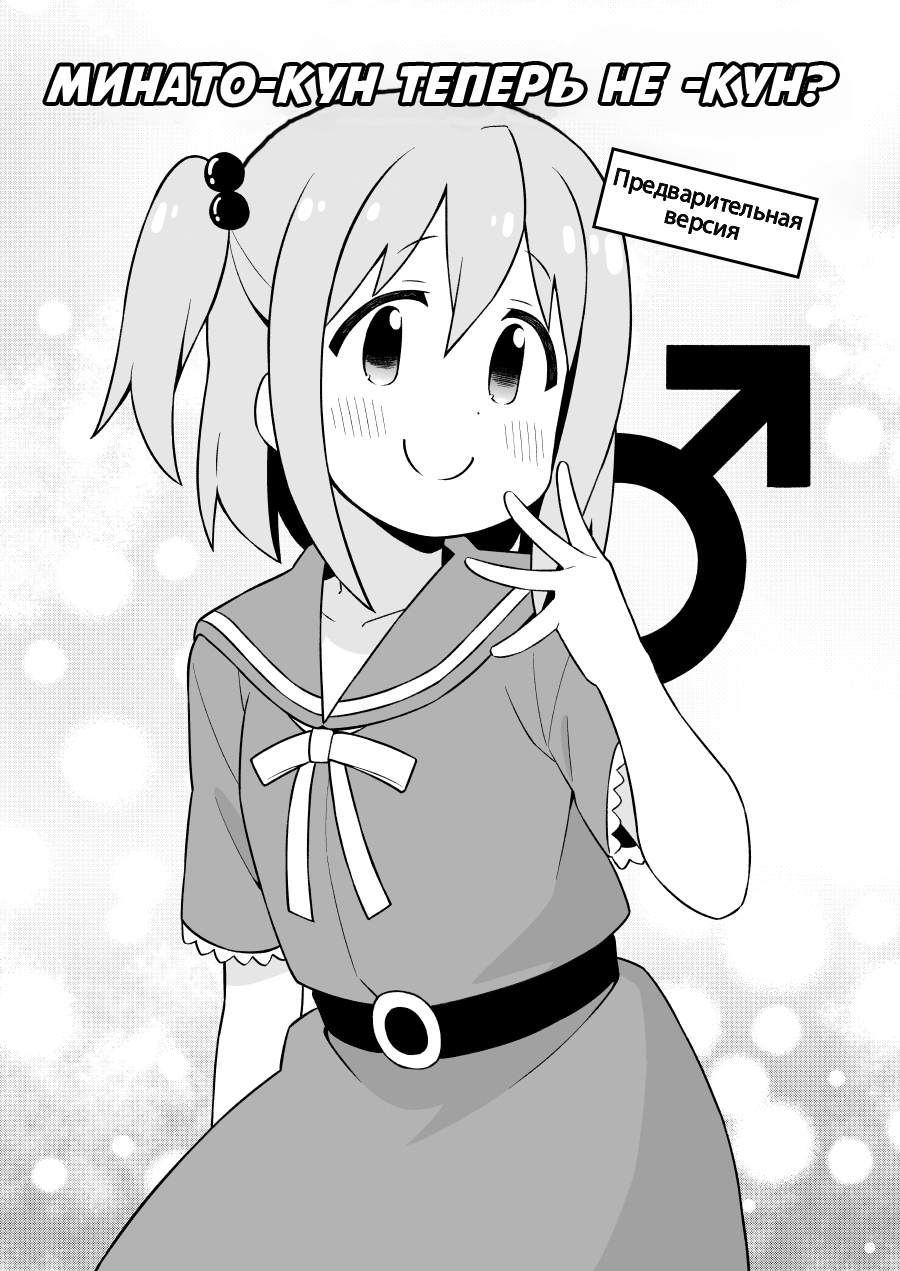
<style>
.page{position:relative;width:900px;height:1271px;background:#ffffff}
.page>*{position:absolute;margin:0}
.t1{font:50px "AvengeanceMArusbyaLiNcE";color:#ffffff}
.t2{font:25px/25px "MyriadPro-Regular";color:#080808}
</style>
<div class="page">
<p class="t1" style="left:46px;top:65px;width:790px;height:39px">Минато-кун  теперь  не  -кун?</p>
<p class="t2" style="left:613px;top:168px;width:190px;height:72px;text-align:center;rotate:14deg">Предварительная<br>версия</p>
</div>
